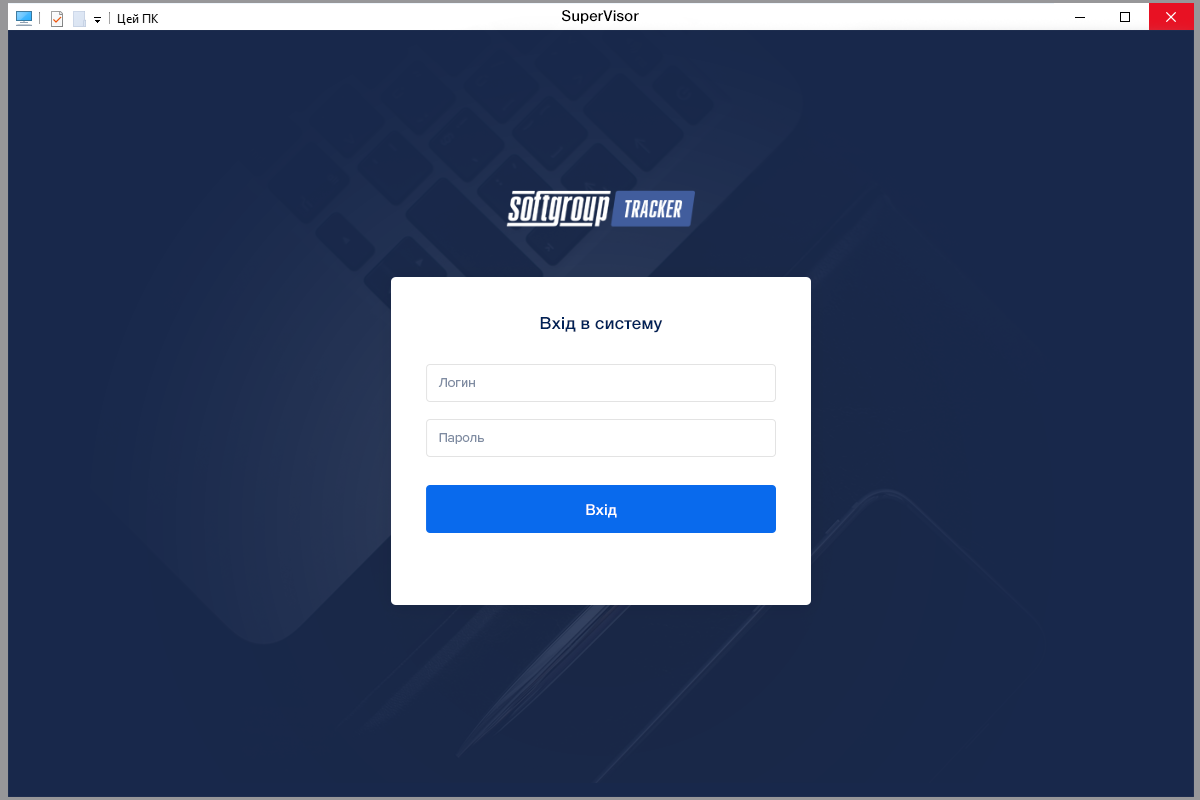
<style>
.page{position:relative;width:1200px;height:800px;background:#18284b}
.page>*{position:absolute;margin:0}
.t1{font:15px "HelveticaNeueCyr-Medium";letter-spacing:0.01em;color:#000000}
.t2{font:17px "HelveticaNeueCyr-Medium";letter-spacing:0.01em;color:#002157}
.t3{font:13px "ProximaNova-Regular";letter-spacing:0.01em;color:#7f8ca2}
.t4{font:15px "HelveticaNeueCyr-Medium";letter-spacing:0.01em;color:#ffffff}
</style>
<div class="page">
<p class="t1" style="left:562px;top:10px;width:77px;height:14px">SuperVisor</p>
<p class="t2" style="left:540px;top:317px;width:123px;height:16px">Вхід в систему</p>
<p class="t3" style="left:438px;top:378px;width:37px;height:9px">Логин</p>
<p class="t3" style="left:439px;top:433px;width:45px;height:11px">Пароль</p>
<p class="t4" style="left:586px;top:504px;width:31px;height:14px">Вхід</p>
</div>
